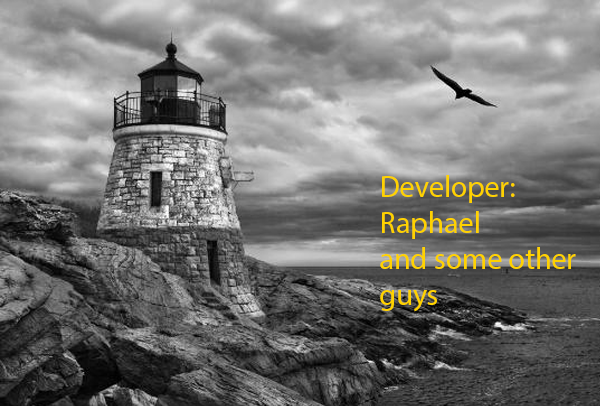
<style>
.page{position:relative;width:600px;height:406px}
.page>*{position:absolute;margin:0}
.t1{font:30px "MyriadPro-Regular";color:#ffd200}
</style>
<div class="page">
<p class="t1" style="left:380px;top:175px;width:196px;height:137px">Developer:<br>Raphael <br>and some other guys</p>
</div>
